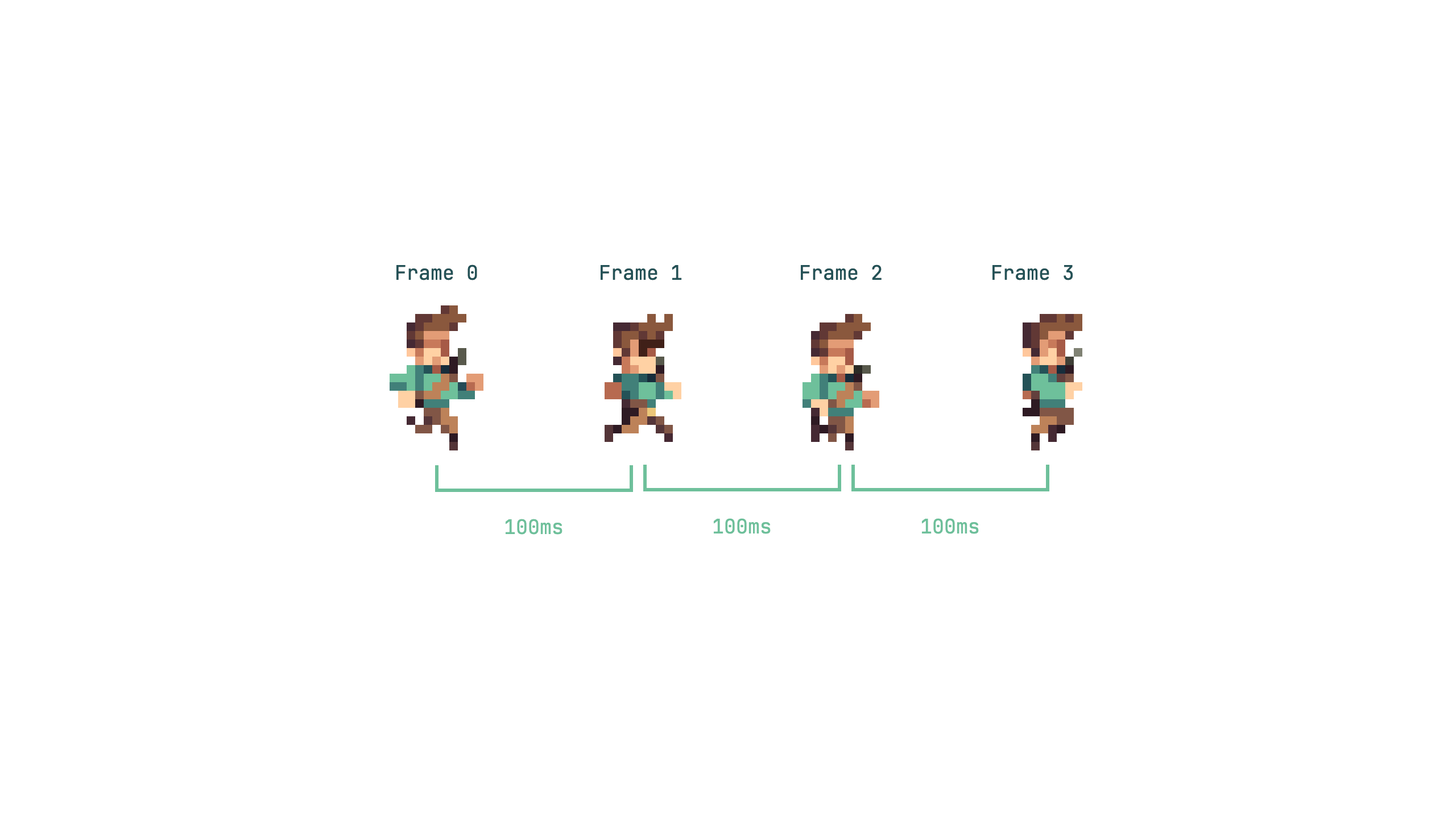
<style>
.page{position:relative;width:1456px;height:819px;background:#ffffff}
.page>*{position:absolute;margin:0}
.t1{font:19.9px "JetBrainsMono-Regular";color:#245257}
.t2{font:19.9px "JetBrainsMono-Regular";color:#6ec09b}
</style>
<div class="page">
<p class="t1" style="left:396px;top:264px;width:81px;height:16px">Frame 0</p>
<p class="t1" style="left:601px;top:265px;width:81px;height:15px">Frame 1</p>
<p class="t1" style="left:801px;top:264px;width:81px;height:16px">Frame 2</p>
<p class="t1" style="left:992px;top:265px;width:81px;height:15px">Frame 3</p>
<p class="t2" style="left:505px;top:519px;width:57px;height:16px">100ms</p>
<p class="t2" style="left:713px;top:518px;width:58px;height:16px">100ms</p>
<p class="t2" style="left:921px;top:518px;width:58px;height:16px">100ms</p>
</div>
